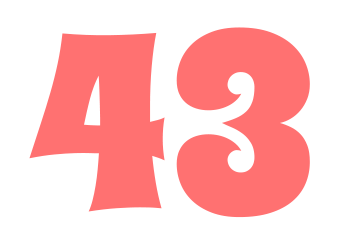
<style>
.page{position:relative;width:354px;height:236px;background:#ffffff}
.page>*{position:absolute;margin:0}
.t1{font:250px "SpicyRice-Regular";color:#ff7171}
</style>
<div class="page">
<p class="t1" style="left:29px;top:27px;width:281px;height:191px">43</p>
</div>
